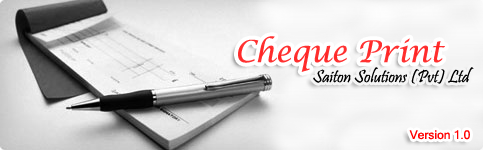
<style>
.page{position:relative;width:483px;height:150px}
.page>*{position:absolute;margin:0}
.t1{font:30px "LucidaCalligraphy-Italic";color:#ff2f2f}
.t2{font:18px "Pristina-Regular";color:#000000}
.t3{font:12px "MicrosoftSansSerif";color:#ff0000}
</style>
<div class="page">
<p class="t1" style="left:238px;top:36px;width:207px;height:36px">Cheque Print</p>
<p class="t2" style="left:313px;top:67px;width:161px;height:17px">Saiton Solutions (Pvt) Ltd</p>
<p class="t3" style="left:409px;top:130px;width:61px;height:10px">Version 1.0</p>
</div>
